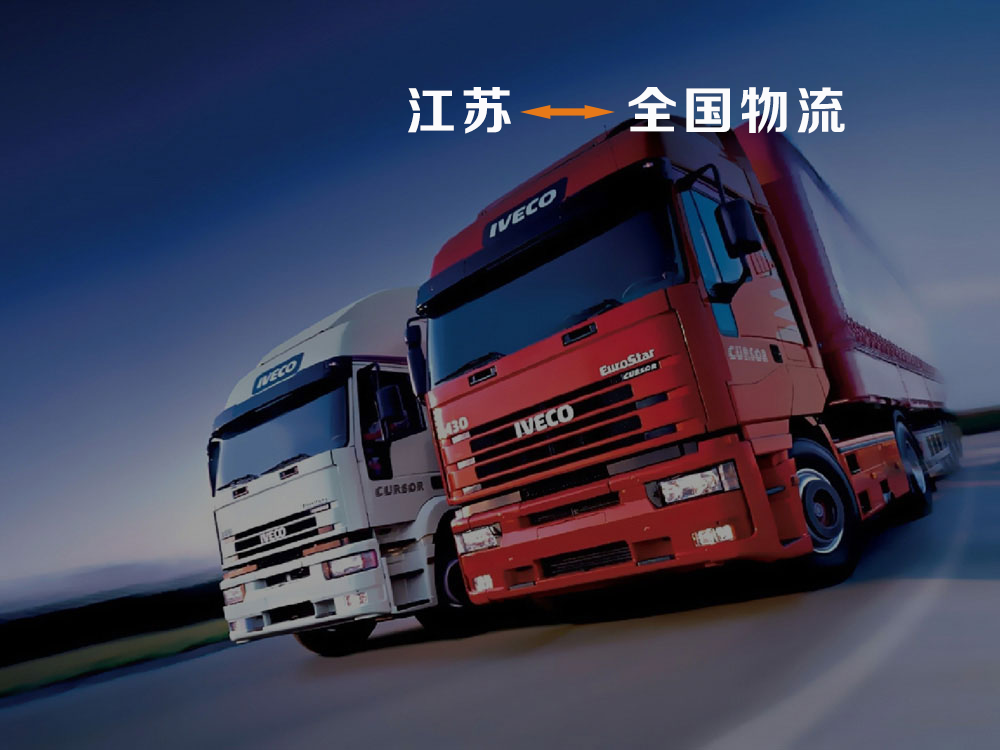
<style>
.page{position:relative;width:1000px;height:750px}
.page>*{position:absolute;margin:0}
.t1{font:50.9px "FZZCHJW--GB1-0";letter-spacing:0.1em;color:#fbfbfc}
</style>
<div class="page">
<p class="t1" style="left:408px;top:87px;width:437px;height:47px">江苏     全国物流</p>
</div>
